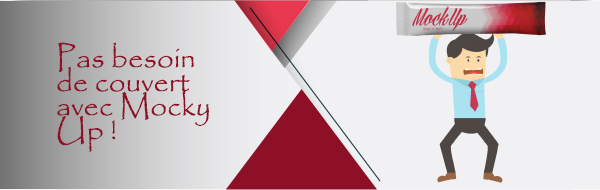
<style>
.page{position:relative;width:600px;height:190px;background:#f1f1f3}
.page>*{position:absolute;margin:0}
.t1{font:30px/24px "Papyrus-Regular";color:#8d1026}
</style>
<div class="page">
<p class="t1" style="left:57px;top:42px;width:152px;height:110px">Pas besoin de couvert avec Mocky Up !</p>
</div>
